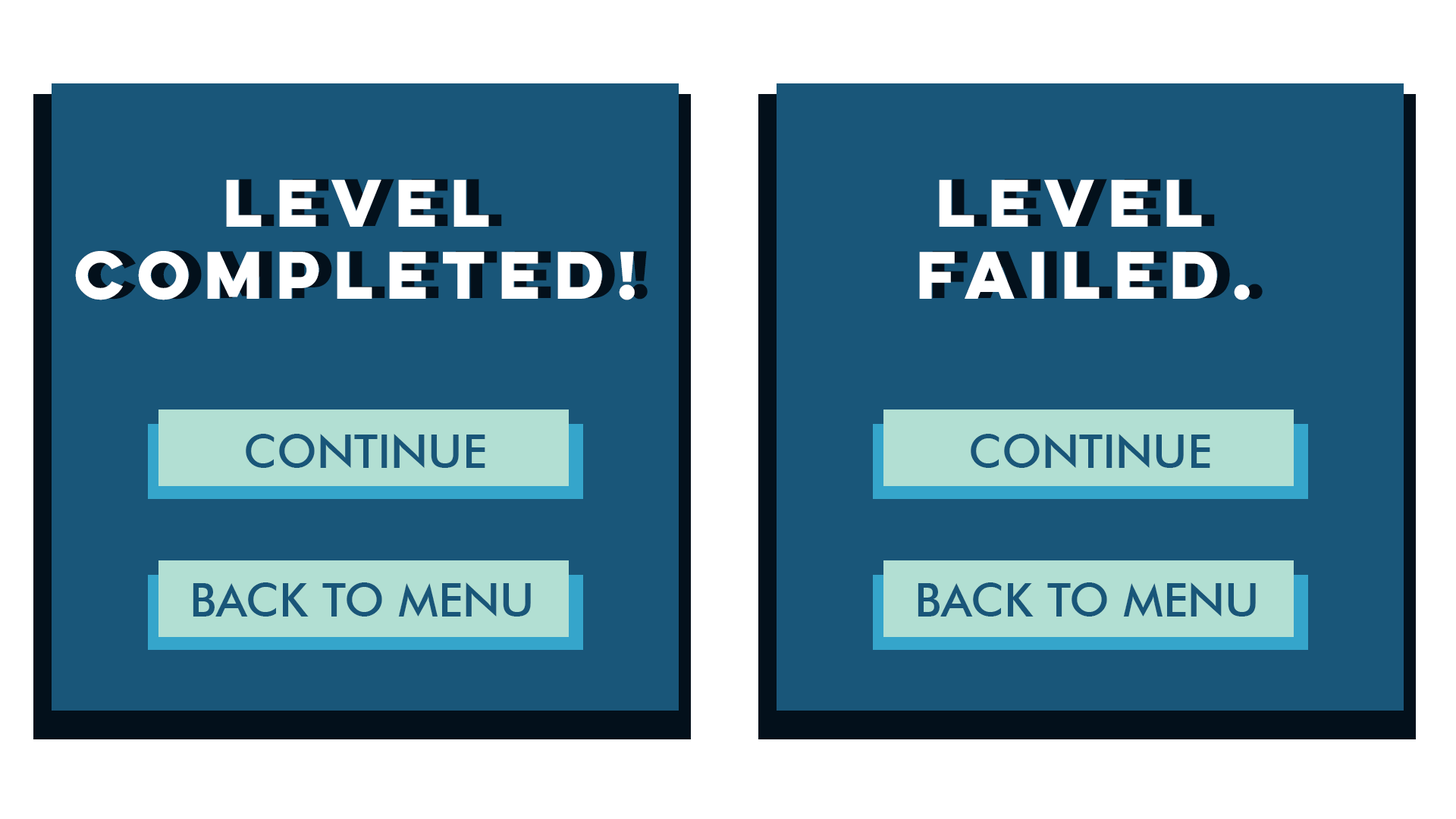
<style>
.page{position:relative;width:1456px;height:819px;background:#195679}
.page>*{position:absolute;margin:0}
.t1{font:60.1px "LuloCleanOne-Bold";color:#ffffff}
.t2{font:46.3px "FuturaBT-Medium";color:#195679}
</style>
<div class="page">
<p class="t1" style="left:75px;top:180px;width:560px;height:120px;text-align:center">LEVEL<br>COMPLETED!</p>
<p class="t1" style="left:919px;top:180px;width:331px;height:120px;text-align:center">LEVEL <br>FAILED.</p>
<p class="t2" style="left:246px;top:434px;width:239px;height:34px">CONTINUE</p>
<p class="t2" style="left:971px;top:434px;width:239px;height:34px">CONTINUE</p>
<p class="t2" style="left:193px;top:582px;width:338px;height:35px">BACK TO MENU</p>
<p class="t2" style="left:918px;top:582px;width:338px;height:35px">BACK TO MENU</p>
</div>
